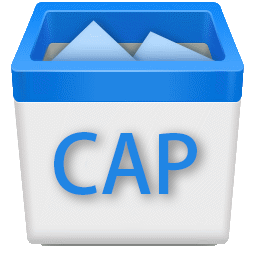
<style>
.page{position:relative;width:256px;height:256px;background:#ffffff}
.page>*{position:absolute;margin:0}
.t1{font:80px "AdobeHeitiStd-Regular";color:#2085e4}
</style>
<div class="page">
<p class="t1" style="left:54px;top:132px;width:143px;height:63px">CAP</p>
</div>
